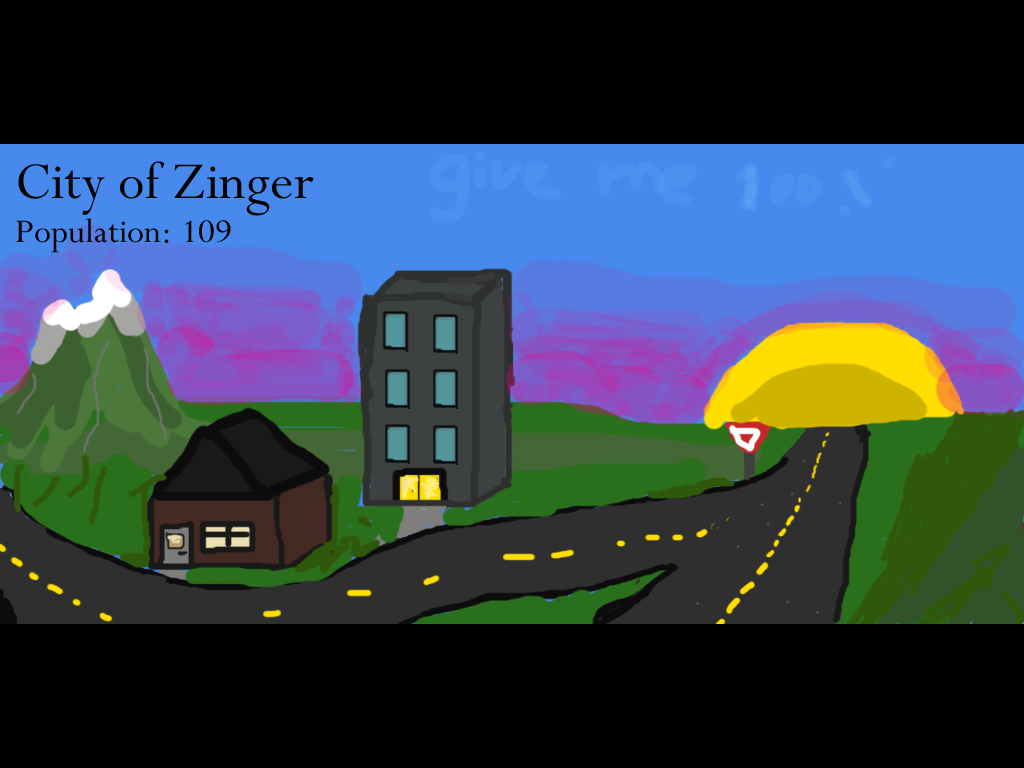
<style>
.page{position:relative;width:1024px;height:768px;background:#000000}
.page>*{position:absolute;margin:0}
.t1{font:58.1px "Perpetua";color:#000000}
.t2{font:37.4px "Perpetua";color:#000000}
</style>
<div class="page">
<p class="t1" style="left:18px;top:161px;width:296px;height:55px">City of Zinger</p>
<p class="t2" style="left:16px;top:218px;width:215px;height:35px">Population: 109</p>
</div>
